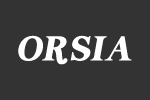
<style>
.page{position:relative;width:150px;height:100px;background:#333333}
.page>*{position:absolute;margin:0}
.t1{font:30px "BohemianSoul-Regular";letter-spacing:0.05em;color:#ffffff;font-style:italic}
</style>
<div class="page">
<p class="t1" style="left:18px;top:35px;width:114px;height:30px">ORSIA</p>
</div>
